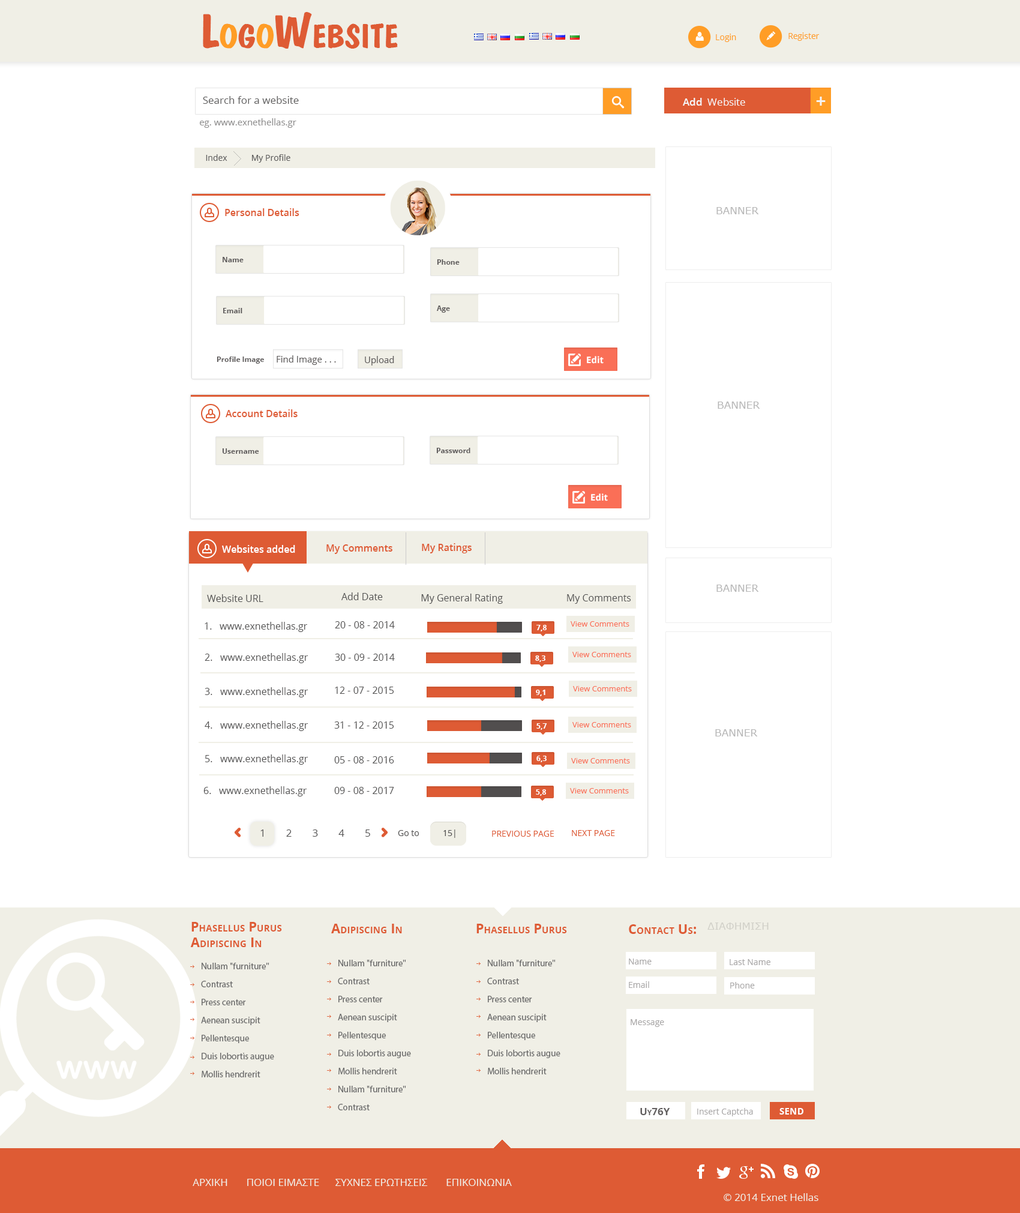
<style>
.page{position:relative;width:1020px;height:1213px;background:#ffffff}
.page>*{position:absolute;margin:0}
.t1{font:48px "DomkratBold";color:#de5b34;font-variant:small-caps}
.t2{font:48px "DomkratBold";color:#ff9d26;font-variant:small-caps}
.t3{font:8.4px "OpenSans";color:#ff9d26}
.t4{font:10.2px "OpenSans";color:#5e5d5d}
.t5{font:10.2px "OpenSans";color:#f5f5f5}
.t6{font:10.2px "OpenSans-Semibold";color:#f5f5f5}
.t7{font:13.2px "Verdana-Bold";color:#f5f5f5}
.t8{font:9px "OpenSans";color:#919090}
.t9{font:8.4px "OpenSans";color:#5e5d5d}
.t10{font:9.6px "OpenSans-Semibold";color:#de5b34}
.t11{font:10.2px "Verdana";color:#b8b8b8;text-transform:uppercase}
.t12{font:7.2px "OpenSans-Bold";color:#5e5b5b}
.t13{font:9px "OpenSans";color:#5e5b5b}
.t14{font:9px "OpenSans-Bold";color:#ffffff}
.t15{font:9.6px "OpenSans-Semibold";color:#ffffff}
.t16{font:9.6px "OpenSans";color:#535252}
.t17{font:7.2px "OpenSans-Bold";color:#ffffff}
.t18{font:7.8px "OpenSans";color:#fa6f57}
.t19{font:10.2px "OpenSans";letter-spacing:2em;color:#545353}
.t20{font:8.4px "OpenSans";color:#545353}
.t21{font:8.4px "OpenSans";color:#de5b34}
.t22{font:13.2px "OpenSans-Bold";color:#de5b34;font-variant:small-caps}
.t23{font:10.2px "Verdana";color:#d2d1c9;text-transform:uppercase}
.t24{font:9px/18px "MyriadPro-Regular";color:#6b6b6b}
.t25{font:8.4px "OpenSans";color:#a9a7a7}
.t26{font:10.2px "OpenSans-Bold";color:#625f5f;font-variant:small-caps}
.t27{font:13.2px "OpenSans-Bold";color:#ffffff;font-variant:small-caps}
.t28{font:10.2px "OpenSans";color:#f0efe6}
</style>
<div class="page">
<p class="t1" style="left:203px;top:12px;width:195px;height:37px">L<span class="t2">o</span>g<span class="t2">o</span>Website</p>
<p class="t3" style="left:716px;top:34px;width:20px;height:8px">Login</p>
<p class="t3" style="left:788px;top:32px;width:32px;height:9px">Register</p>
<p class="t4" style="left:203px;top:96px;width:96px;height:8px">Search for a website</p>
<p class="t5" style="left:683px;top:98px;width:62px;height:8px"><span class="t6">Add </span> Website</p>
<p class="t7" style="left:816px;top:97px;width:10px;height:9px">+</p>
<p class="t8" style="left:200px;top:118px;width:96px;height:10px">eg. www.exnethellas.gr</p>
<p class="t9" style="left:206px;top:154px;width:84px;height:9px">Index           My Profile</p>
<p class="t10" style="left:225px;top:208px;width:74px;height:8px">Personal Details</p>
<p class="t11" style="left:716px;top:207px;width:43px;height:7px">BANNER</p>
<p class="t12" style="left:223px;top:257px;width:21px;height:5px">Name</p>
<p class="t12" style="left:437px;top:259px;width:23px;height:6px">Phone</p>
<p class="t12" style="left:437px;top:305px;width:13px;height:8px">Age</p>
<p class="t12" style="left:223px;top:308px;width:19px;height:5px">Email</p>
<p class="t12" style="left:217px;top:356px;width:47px;height:8px">Profile Image</p>
<p class="t13" style="left:277px;top:355px;width:59px;height:10px">Find Image . . .</p>
<p class="t13" style="left:365px;top:356px;width:29px;height:9px">Upload</p>
<p class="t14" style="left:587px;top:356px;width:17px;height:8px">Edit</p>
<p class="t11" style="left:718px;top:401px;width:42px;height:8px">BANNER</p>
<p class="t10" style="left:226px;top:409px;width:72px;height:8px">Account Details</p>
<p class="t12" style="left:222px;top:448px;width:37px;height:6px">Username</p>
<p class="t12" style="left:436px;top:448px;width:34px;height:5px">Password</p>
<p class="t14" style="left:591px;top:493px;width:17px;height:8px">Edit</p>
<p class="t15" style="left:222px;top:545px;width:73px;height:8px">Websites added</p>
<p class="t10" style="left:326px;top:544px;width:66px;height:10px">My Comments</p>
<p class="t10" style="left:422px;top:543px;width:50px;height:10px">My Ratings</p>
<p class="t16" style="left:341px;top:592px;width:42px;height:8px">Add Date</p>
<p class="t16" style="left:421px;top:593px;width:82px;height:11px">My General Rating</p>
<p class="t11" style="left:716px;top:584px;width:43px;height:8px">BANNER</p>
<p class="t16" style="left:207px;top:594px;width:56px;height:8px">Website URL</p>
<p class="t16" style="left:567px;top:594px;width:64px;height:10px">My Comments</p>
<p class="t16" style="left:205px;top:622px;width:102px;height:10px">1.   www.exnethellas.gr</p>
<p class="t16" style="left:335px;top:621px;width:60px;height:7px">20 - 08 - 2014</p>
<p class="t17" style="left:536px;top:625px;width:11px;height:6px">7,8</p>
<p class="t18" style="left:571px;top:621px;width:58px;height:5px">View Comments</p>
<p class="t16" style="left:205px;top:653px;width:103px;height:10px">2.   www.exnethellas.gr</p>
<p class="t16" style="left:335px;top:653px;width:60px;height:8px">30 - 09 - 2014</p>
<p class="t18" style="left:572px;top:652px;width:59px;height:5px">View Comments</p>
<p class="t17" style="left:535px;top:655px;width:10px;height:7px">8,3</p>
<p class="t16" style="left:205px;top:687px;width:103px;height:10px">3.   www.exnethellas.gr</p>
<p class="t16" style="left:335px;top:686px;width:59px;height:8px">12 - 07 - 2015</p>
<p class="t17" style="left:536px;top:689px;width:9px;height:7px">9,1</p>
<p class="t18" style="left:573px;top:686px;width:59px;height:5px">View Comments</p>
<p class="t16" style="left:205px;top:721px;width:103px;height:10px">4.   www.exnethellas.gr</p>
<p class="t16" style="left:334px;top:721px;width:60px;height:7px">31 - 12 - 2015</p>
<p class="t17" style="left:536px;top:723px;width:11px;height:7px">5,7</p>
<p class="t18" style="left:572px;top:722px;width:59px;height:5px">View Comments</p>
<p class="t11" style="left:715px;top:729px;width:43px;height:7px">BANNER</p>
<p class="t16" style="left:205px;top:754px;width:103px;height:10px">5.   www.exnethellas.gr</p>
<p class="t16" style="left:334px;top:756px;width:60px;height:7px">05 - 08 - 2016</p>
<p class="t17" style="left:536px;top:755px;width:11px;height:7px">6,3</p>
<p class="t18" style="left:571px;top:758px;width:59px;height:5px">View Comments</p>
<p class="t16" style="left:203px;top:786px;width:104px;height:10px">6.   www.exnethellas.gr</p>
<p class="t16" style="left:334px;top:787px;width:60px;height:7px">09 - 08 - 2017</p>
<p class="t17" style="left:536px;top:789px;width:10px;height:7px">5,8</p>
<p class="t18" style="left:570px;top:788px;width:59px;height:5px">View Comments</p>
<p class="t19" style="left:260px;top:829px;width:110px;height:7px">12345</p>
<p class="t20" style="left:398px;top:830px;width:21px;height:6px">Go to</p>
<p class="t20" style="left:443px;top:829px;width:12px;height:9px">15|</p>
<p class="t21" style="left:492px;top:830px;width:62px;height:6px">PREVIOUS PAGE</p>
<p class="t21" style="left:572px;top:830px;width:43px;height:6px">NEXT PAGE</p>
<p class="t22" style="left:190px;top:922px;width:92px;height:25px">Phasellus Purus <br> Adipiscing In</p>
<p class="t22" style="left:331px;top:923px;width:71px;height:10px">Adipiscing In</p>
<p class="t22" style="left:476px;top:923px;width:91px;height:10px">Phasellus Purus</p>
<p class="t22" style="left:629px;top:924px;width:67px;height:10px">Contact Us:</p>
<p class="t23" style="left:707px;top:922px;width:62px;height:7px">ΔΙΑΦΗΜΙΣΗ</p>
<p class="t24" style="left:201px;top:962px;width:73px;height:115px">Nullam "furniture"<br>Contrast<br>Press center<br>Aenean suscipit<br>Pellentesque<br>Duis lobortis augue <br>Mollis hendrerit</p>
<p class="t24" style="left:338px;top:959px;width:73px;height:151px">Nullam "furniture"<br>Contrast<br>Press center<br>Aenean suscipit<br>Pellentesque<br>Duis lobortis augue <br>Mollis hendrerit<br>Nullam "furniture"<br>Contrast</p>
<p class="t24" style="left:487px;top:959px;width:73px;height:115px">Nullam "furniture"<br>Contrast<br>Press center<br>Aenean suscipit<br>Pellentesque<br>Duis lobortis augue <br>Mollis hendrerit</p>
<p class="t25" style="left:629px;top:958px;width:23px;height:6px">Name</p>
<p class="t25" style="left:730px;top:959px;width:40px;height:6px">Last Name</p>
<p class="t25" style="left:629px;top:981px;width:20px;height:7px">Email</p>
<p class="t25" style="left:730px;top:982px;width:25px;height:6px">Phone</p>
<p class="t25" style="left:631px;top:1019px;width:33px;height:8px">Message</p>
<p class="t26" style="left:640px;top:1108px;width:30px;height:7px">Uy76Y</p>
<p class="t25" style="left:697px;top:1108px;width:56px;height:8px">Insert Captcha</p>
<p class="t27" style="left:779px;top:1108px;width:24px;height:6px">send</p>
<p class="t28" style="left:193px;top:1178px;width:319px;height:8px">ΑΡΧΙΚΗ       ΠΟΙΟΙ ΕΙΜΑΣΤΕ      ΣΥΧΝΕΣ ΕΡΩΤΗΣΕΙΣ       ΕΠΙΚΟΙΝΩΝΙΑ</p>
<p class="t28" style="left:724px;top:1193px;width:94px;height:8px">© 2014 Exnet Hellas</p>
</div>
